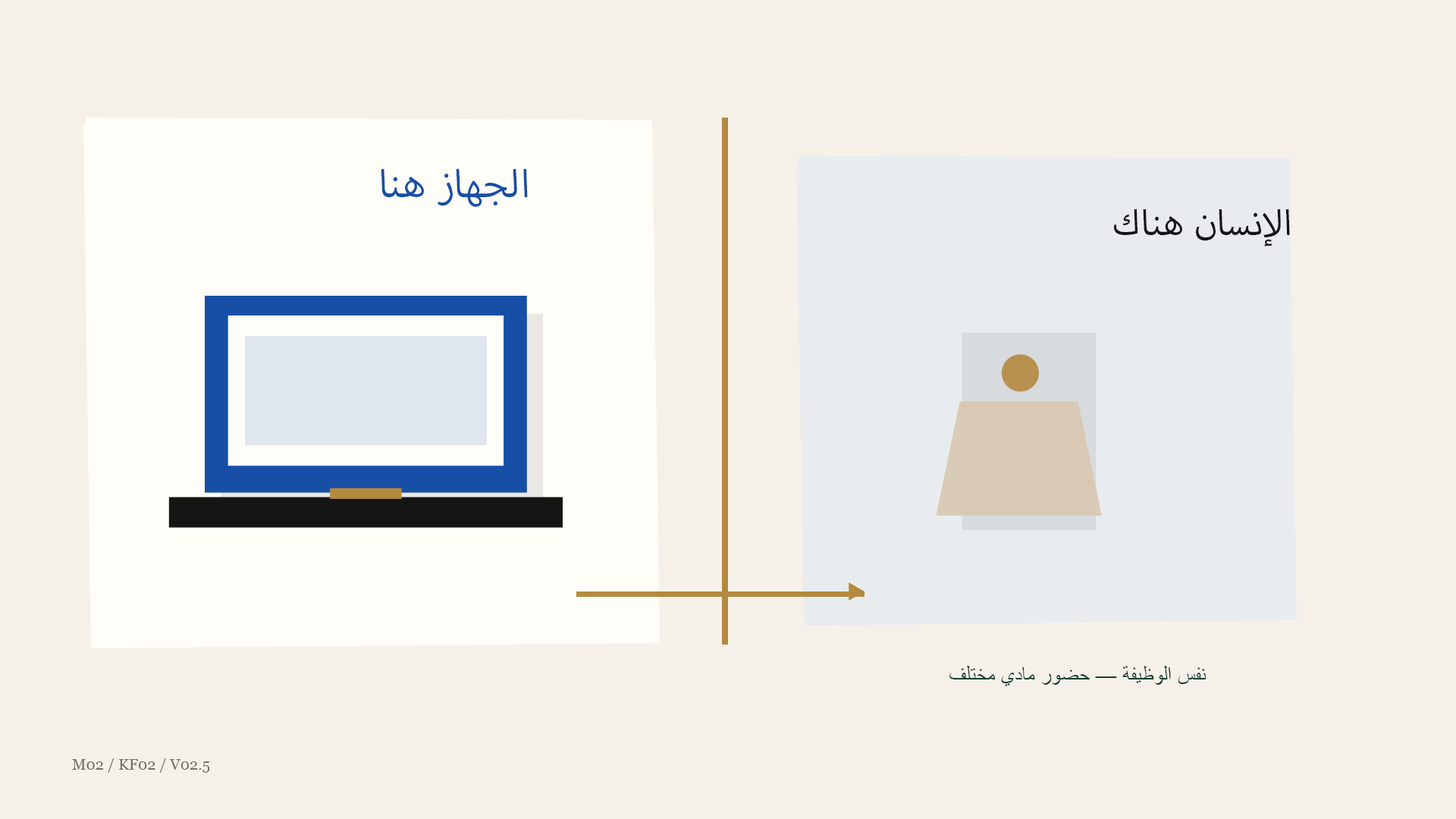
<style>
.page{position:relative;width:1456px;height:819px;background:#f6f1e8}
.page>*{position:absolute;margin:0}
.t1{font:54.6px "MyriadArabic-Regular";color:#174fa6}
.t2{font:50px "MyriadArabic-Regular";color:#151515}
.t3{font:86.8px "ArialMT";color:#b58a3e}
.t4{font:21.2px "ArialMT";color:#173c32}
.t5{font:15.2px "Georgia";color:#716f6b}
</style>
<div class="page">
<p class="t1" style="left:381px;top:168px;width:147px;height:39px">الجهاز هنا</p>
<p class="t2" style="left:1114px;top:209px;width:176px;height:37px">الإنسان هناك</p>
<p class="t3" style="left:1001px;top:354px;width:38px;height:38px;opacity:0.92">●</p>
<p class="t4" style="left:949px;top:665px;width:257px;height:21px">نفس الوظيفة — حضور مادي مختلف</p>
<p class="t5" style="left:72px;top:758px;width:138px;height:15px">M02 / KF02 / V02.5</p>
</div>
